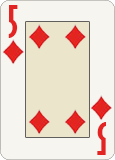
<style>
.page{position:relative;width:115px;height:160px;background:#f7f5ef}
.page>*{position:absolute;margin:0}
.t1{font:41.7px "GillSansMT-ExtraCondensedBold";color:#e22523}
</style>
<div class="page">
<p class="t1" style="left:8px;top:5px;width:10px;height:33px">50</p>
<p class="t1" style="left:97px;top:122px;width:9px;height:33px;rotate:180deg">5</p>
</div>
